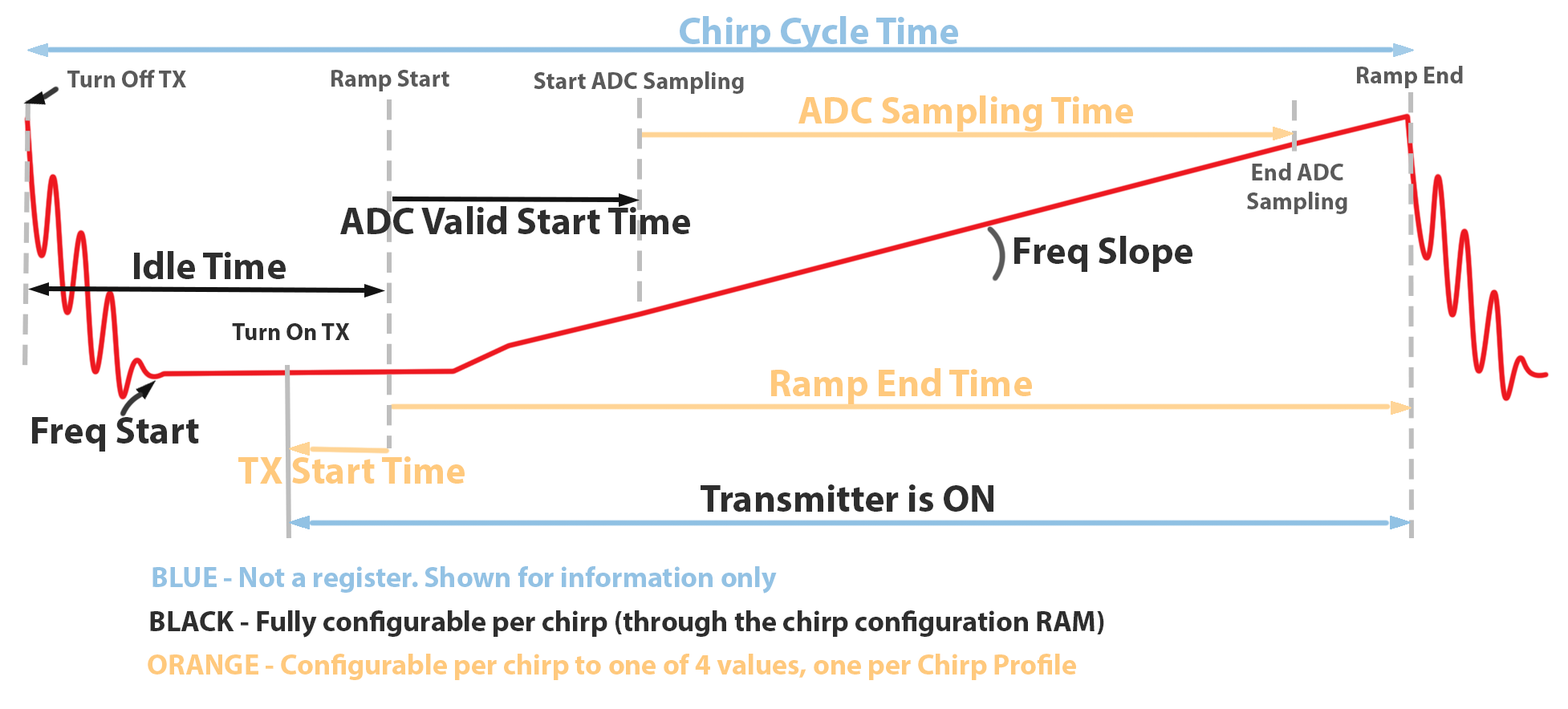
<style>
.page{position:relative;width:1568px;height:709px;background:#ffffff}
.page>*{position:absolute;margin:0}
.t1{font:38.5px "MyriadPro-Bold";color:#93c2e4}
.t2{font:24.1px "MyriadPro-Bold";color:#5a5a5a}
.t3{font:38.5px "MyriadPro-Bold";color:#ffc97d}
.t4{font:38.5px "MyriadPro-Bold";color:#2e2e2e}
.t5{font:24.1px "MyriadPro-Bold";color:#2e2e2e}
.t6{font:28.9px "MyriadPro-Bold";color:#93c2e4}
.t7{font:28.9px "MyriadPro-Bold";color:#2e2e2e}
.t8{font:28.9px "MyriadPro-Bold";color:#ffc97d}
</style>
<div class="page">
<p class="t1" style="left:680px;top:16px;width:278px;height:36px">Chirp Cycle Time</p>
<p class="t2" style="left:1357px;top:66px;width:106px;height:22px">Ramp End</p>
<p class="t2" style="left:67px;top:70px;width:119px;height:17px">Turn Off TX</p>
<p class="t2" style="left:331px;top:70px;width:118px;height:21px">Ramp Start</p>
<p class="t2" style="left:534px;top:71px;width:210px;height:23px">Start ADC Sampling</p>
<p class="t3" style="left:798px;top:95px;width:335px;height:37px">ADC Sampling Time</p>
<p class="t2" style="left:1247px;top:163px;width:100px;height:51px;text-align:center">End ADC<br>Sampling</p>
<p class="t4" style="left:340px;top:206px;width:350px;height:28px">ADC Valid Start Time</p>
<p class="t4" style="left:1014px;top:236px;width:178px;height:36px">Freq Slope</p>
<p class="t4" style="left:134px;top:251px;width:152px;height:28px">Idle Time</p>
<p class="t5" style="left:232px;top:323px;width:118px;height:17px">Turn On TX</p>
<p class="t3" style="left:771px;top:368px;width:261px;height:36px">Ramp End Time</p>
<p class="t4" style="left:32px;top:417px;width:167px;height:35px">Freq Start</p>
<p class="t3" style="left:238px;top:457px;width:227px;height:27px">TX Start Time</p>
<p class="t4" style="left:701px;top:485px;width:292px;height:27px">Transmitter is ON</p>
<p class="t6" style="left:152px;top:567px;width:625px;height:27px">BLUE - Not a register. Shown for information only</p>
<p class="t7" style="left:150px;top:611px;width:954px;height:27px">BLACK - Fully configurable per chirp (through the chirp configuration RAM)</p>
<p class="t8" style="left:148px;top:654px;width:928px;height:26px">ORANGE - Configurable per chirp to one of 4 values, one per Chirp Profile</p>
</div>
